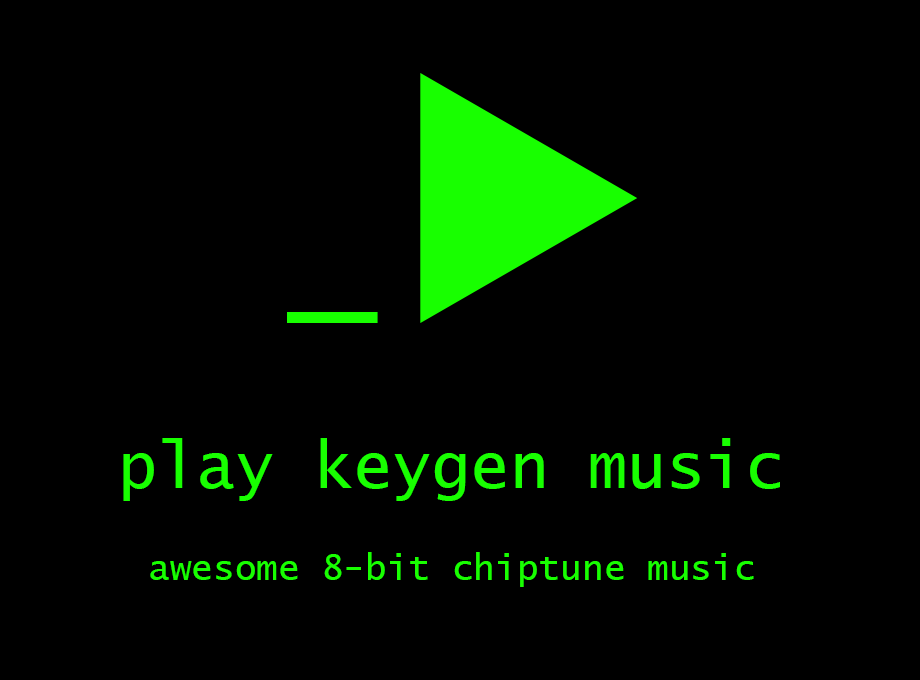
<style>
.page{position:relative;width:920px;height:680px;background:#000000}
.page>*{position:absolute;margin:0}
.t1{font:150px "LucidaConsole";color:#18ff00}
.t2{font:65px "LucidaConsole";color:#18ff00}
.t3{font:36px "LucidaConsole";color:#18ff00}
</style>
<div class="page">
<p class="t1" style="left:287px;top:312px;width:91px;height:11px">_</p>
<p class="t2" style="left:123px;top:438px;width:657px;height:63px">play keygen music</p>
<p class="t3" style="left:150px;top:552px;width:604px;height:35px">awesome 8-bit chiptune music</p>
</div>
